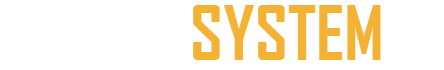
<style>
.page{position:relative;width:444px;height:70px;background:#ffffff}
.page>*{position:absolute;margin:0}
.t1{font:72px "AgencyFB-Bold";color:#f3b233}
.t2{font:72px "AgencyFB-Bold";color:#ffffff}
</style>
<div class="page">
<p class="t1" style="left:100px;top:5px;width:281px;height:55px"><span class="t2">      SW </span>SYSTEM</p>
</div>
